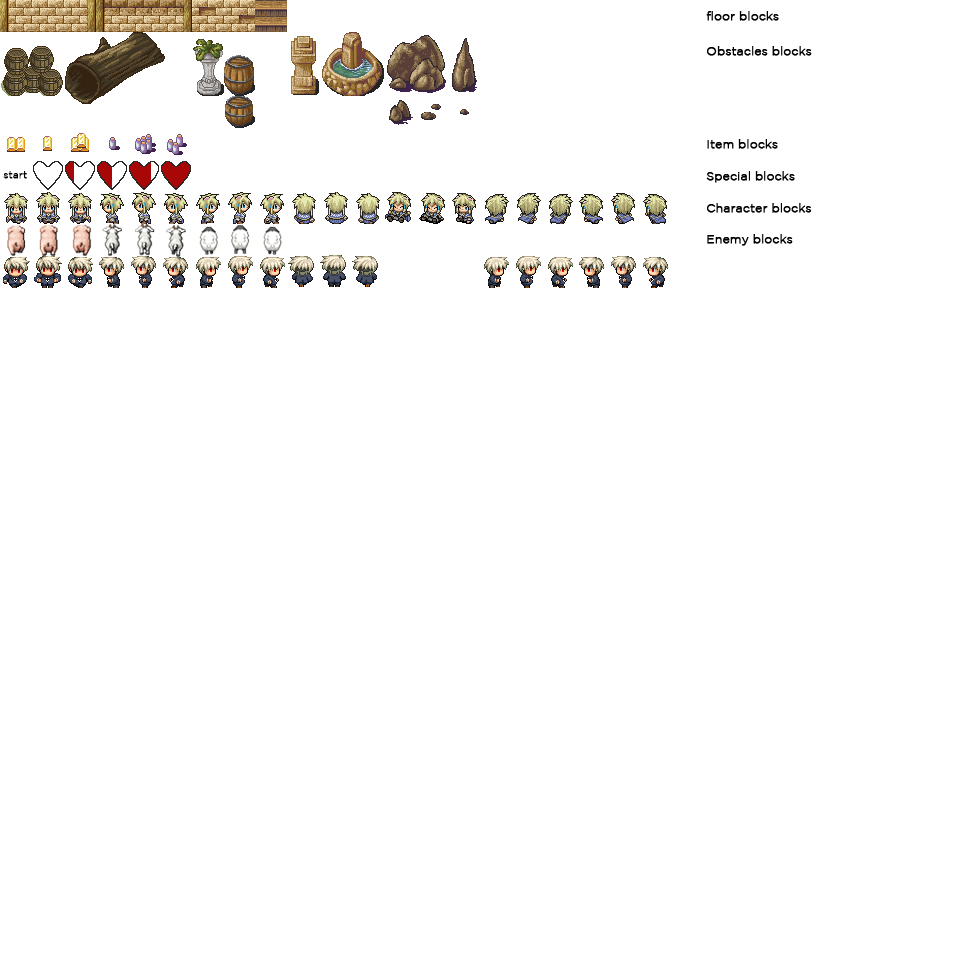
<style>
.page{position:relative;width:960px;height:960px;background:#ffffff}
.page>*{position:absolute;margin:0}
.t1{font:12px "GothamLight";color:#000000;font-weight:bold}
.t2{font:10px "GothamLight";color:#000000;font-weight:bold}
</style>
<div class="page">
<p class="t1" style="left:706px;top:11px;width:73px;height:10px">floor blocks</p>
<p class="t1" style="left:707px;top:46px;width:105px;height:10px">Obstacles blocks</p>
<p class="t1" style="left:707px;top:139px;width:71px;height:10px">Item blocks</p>
<p class="t2" style="left:3px;top:171px;width:24px;height:8px">start</p>
<p class="t1" style="left:706px;top:171px;width:89px;height:12px">Special blocks</p>
<p class="t1" style="left:707px;top:203px;width:104px;height:10px">Character blocks</p>
<p class="t1" style="left:707px;top:234px;width:86px;height:12px">Enemy blocks</p>
</div>
